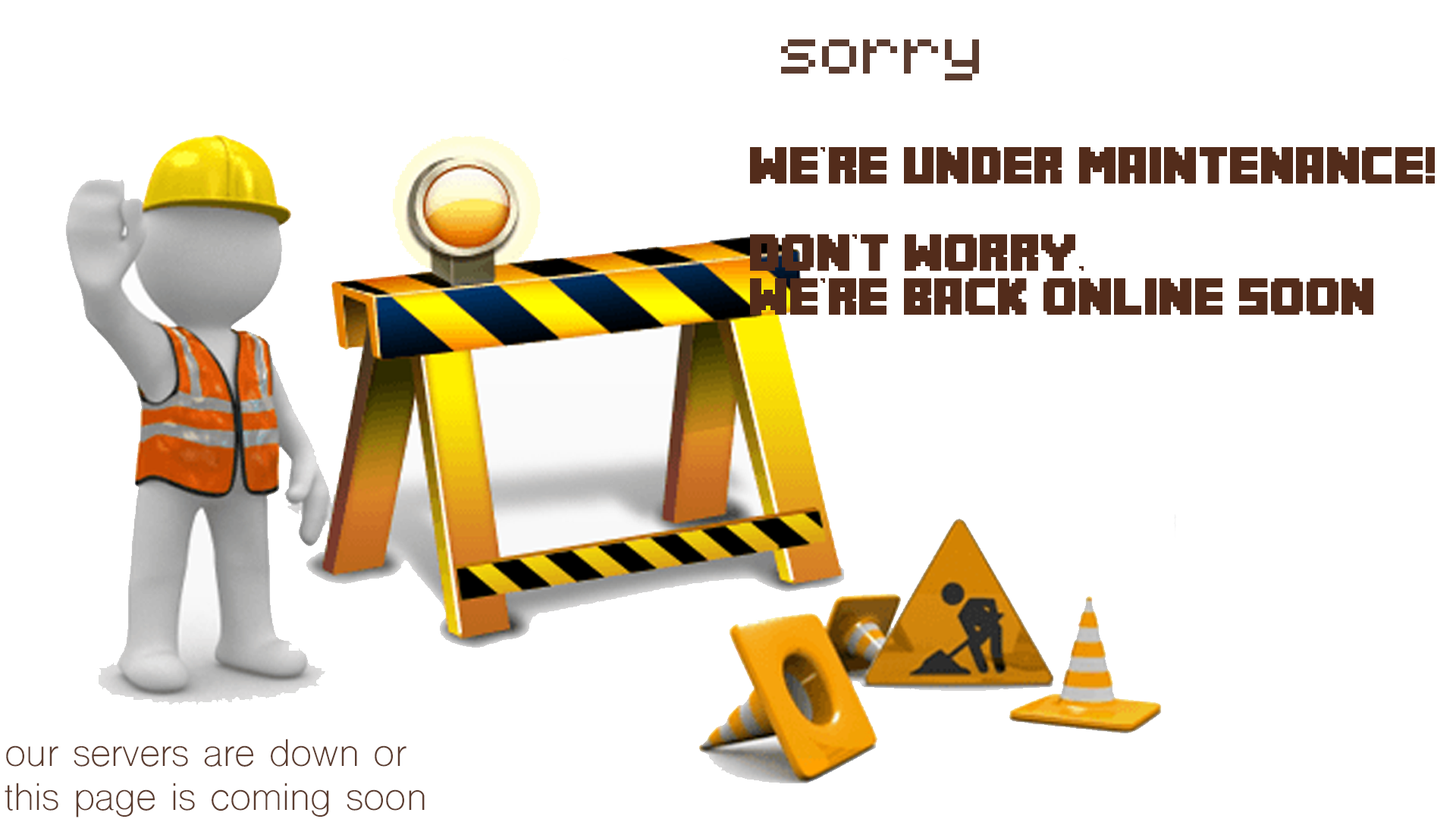
<style>
.page{position:relative;width:1456px;height:819px;background:#ffffff}
.page>*{position:absolute;margin:0}
.t1{font:54.6px "Minecraftia";color:#5c3d30}
.t2{font:36.4px "MineCrafter-3";color:#532c1b}
.t3{font:36.4px "ShreeDev0714";color:#5c3d30}
</style>
<div class="page">
<p class="t1" style="left:781px;top:39px;width:198px;height:41px">sorry</p>
<p class="t2" style="left:750px;top:147px;width:685px;height:168px">WE’RE under maintenance!<br><br>don’t worry,<br>we’re back online soon</p>
<p class="t3" style="left:5px;top:739px;width:420px;height:78px">our servers are down or <br>this page is coming soon</p>
</div>
